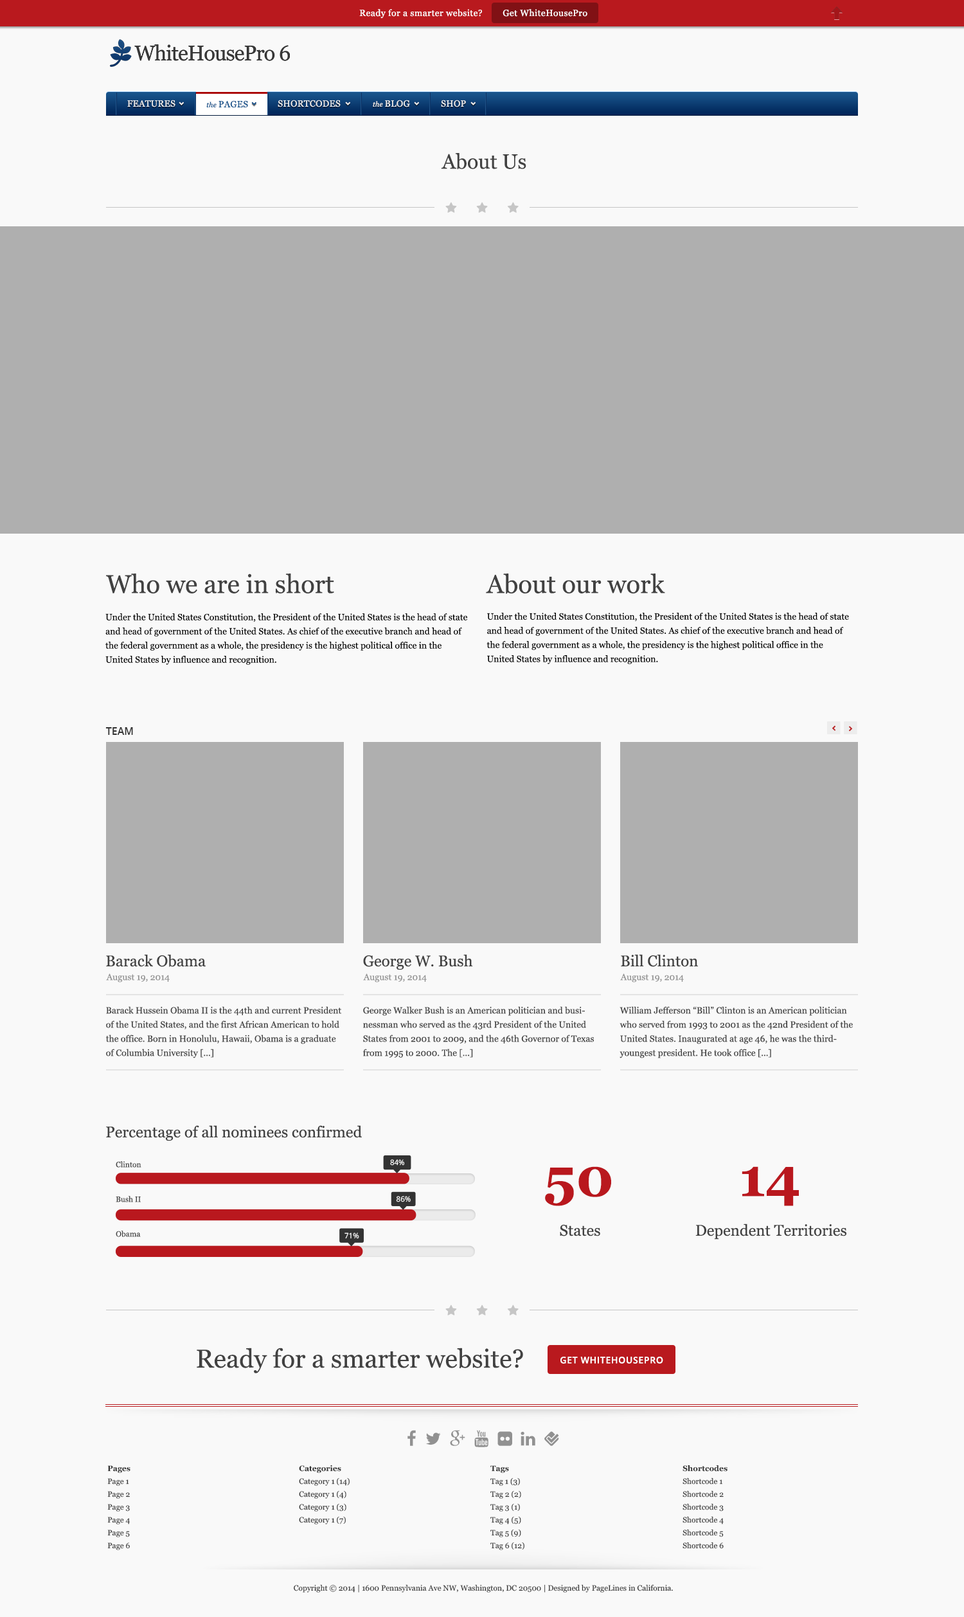
<style>
.page{position:relative;width:964px;height:1617px;background:#f9f9f9}
.page>*{position:absolute;margin:0}
.t1{font:9px "Georgia";letter-spacing:0.033em;color:#ffffff}
.t2{font:9px "Georgia";letter-spacing:0.02em;color:#ededed;text-transform:uppercase}
.t3{font:7.1px "Georgia-Italic";letter-spacing:0.02em;color:#ededed}
.t4{font:9px "Georgia";letter-spacing:0.02em;color:#0f4f89;text-transform:uppercase}
.t5{font:7.1px "Georgia-Italic";letter-spacing:0.02em;color:#0f4f89}
.t6{font:20.7px "Georgia";color:#414141}
.t7{font:25.7px "Georgia";color:#414141}
.t8{font:9px/14.1px "Georgia";color:#000000}
.t9{font:10.3px "OpenSans-Semibold";color:#333333;text-transform:uppercase}
.t10{font:15.4px "Georgia";color:#414141}
.t11{font:9px "Georgia";color:#939393}
.t12{font:9px/14.1px "Georgia";color:#414141}
.t13{font:7.7px "Georgia";color:#414141}
.t14{font:7.4px "OpenSans";color:#ffffff}
.t15{font:54px "Georgia-Bold";color:#b9181e}
.t16{font:9px "OpenSans-Semibold";letter-spacing:0.05em;color:#ffffff;text-transform:uppercase}
.t17{font:7.7px/12.8px "Georgia";color:#333333}
.t18{font:7.7px/12.8px "Georgia-Bold";color:#333333}
.t19{font:7.7px "Georgia";color:#333333}
</style>
<div class="page">
<p class="t1" style="left:359px;top:9px;width:123px;height:10px">Ready for a smarter website?</p>
<p class="t1" style="left:503px;top:9px;width:85px;height:8px">Get WhiteHousePro</p>
<p class="t2" style="left:127px;top:100px;width:339px;height:7px">Features     <span class="t3">the </span>PAGES      Shortcodes       <span class="t3">the </span>Blog        Shop</p>
<p class="t4" style="left:206px;top:100px;width:42px;height:8px"><span class="t5">the </span>PAGES</p>
<p class="t6" style="left:441px;top:153px;width:85px;height:17px">About Us</p>
<p class="t7" style="left:106px;top:573px;width:228px;height:20px">Who we are in short</p>
<p class="t7" style="left:486px;top:573px;width:179px;height:21px">About our work</p>
<p class="t8" style="left:105px;top:613px;width:363px;height:52px">Under the United States Constitution, the President of the United States is the head of state and head of government of the United States. As chief of the executive branch and head of the federal government as a whole, the presidency is the highest political office in the United States by influence and recognition.</p>
<p class="t8" style="left:487px;top:613px;width:362px;height:51px">Under the United States Constitution, the President of the United States is the head of state and head of government of the United States. As chief of the executive branch and head of the federal government as a whole, the presidency is the highest political office in the United States by influence and recognition.</p>
<p class="t9" style="left:105px;top:727px;width:28px;height:8px">Team</p>
<p class="t10" style="left:106px;top:954px;width:100px;height:13px">Barack Obama</p>
<p class="t10" style="left:363px;top:954px;width:110px;height:16px">George W. Bush</p>
<p class="t10" style="left:621px;top:954px;width:77px;height:13px">Bill Clinton</p>
<p class="t11" style="left:106px;top:973px;width:64px;height:9px">August 19, 2014</p>
<p class="t11" style="left:363px;top:973px;width:64px;height:9px">August 19, 2014</p>
<p class="t11" style="left:620px;top:973px;width:64px;height:9px">August 19, 2014</p>
<p class="t12" style="left:105px;top:1006px;width:237px;height:52px">Barack Hussein Obama II is the 44th and current President of the United States, and the first African American to hold the office. Born in Honolulu, Hawaii, Obama is a graduate of Columbia University [...]</p>
<p class="t12" style="left:363px;top:1006px;width:231px;height:52px">George Walker Bush is an American politician and businessman who served as the 43rd President of the United States from 2001 to 2009, and the 46th Governor of Texas from 1995 to 2000. The [...]</p>
<p class="t12" style="left:620px;top:1006px;width:233px;height:52px">William Jefferson “Bill” Clinton is an American politician who served from 1993 to 2001 as the 42nd President of the United States. Inaugurated at age 46, he was the third-youngest president. He took office [...]</p>
<p class="t10" style="left:106px;top:1125px;width:256px;height:16px">Percentage of all nominees confirmed</p>
<p class="t13" style="left:116px;top:1161px;width:25px;height:6px">Clinton</p>
<p class="t14" style="left:390px;top:1159px;width:15px;height:7px">84%</p>
<p class="t15" style="left:545px;top:1166px;width:66px;height:40px">50</p>
<p class="t15" style="left:742px;top:1166px;width:57px;height:40px">14</p>
<p class="t13" style="left:116px;top:1196px;width:25px;height:6px">Bush II</p>
<p class="t14" style="left:396px;top:1196px;width:15px;height:6px">86%</p>
<p class="t10" style="left:560px;top:1224px;width:40px;height:12px">States</p>
<p class="t10" style="left:696px;top:1223px;width:151px;height:16px">Dependent Territories</p>
<p class="t13" style="left:116px;top:1230px;width:25px;height:7px">Obama</p>
<p class="t14" style="left:345px;top:1232px;width:14px;height:7px">71%</p>
<p class="t7" style="left:197px;top:1347px;width:326px;height:26px">Ready for a smarter website?</p>
<p class="t16" style="left:561px;top:1356px;width:102px;height:8px">Get WhiteHousePro</p>
<p class="t17" style="left:107px;top:1465px;width:23px;height:85px"><span class="t18">Pages<br></span>Page 1<br>Page 2<br>Page 3<br>Page 4<br>Page 5<br>Page 6</p>
<p class="t17" style="left:299px;top:1464px;width:51px;height:60px"><span class="t18">Categories<br></span>Category 1 (14)<br>Category 1 (4)<br>Category 1 (3)<br>Category 1 (7)</p>
<p class="t17" style="left:491px;top:1465px;width:34px;height:85px"><span class="t18">Tags<br></span>Tag 1 (3)<br>Tag 2 (2)<br>Tag 3 (1)<br>Tag 4 (5)<br>Tag 5 (9)<br>Tag 6 (12)</p>
<p class="t17" style="left:683px;top:1464px;width:45px;height:85px"><span class="t18">Shortcodes<br></span>Shortcode 1<br>Shortcode 2<br>Shortcode 3<br>Shortcode 4<br>Shortcode 5<br>Shortcode 6</p>
<p class="t19" style="left:294px;top:1584px;width:379px;height:8px">Copyright © 2014 | 1600 Pennsylvania Ave NW, Washington, DC 20500 | Designed by PageLines in California.</p>
</div>
